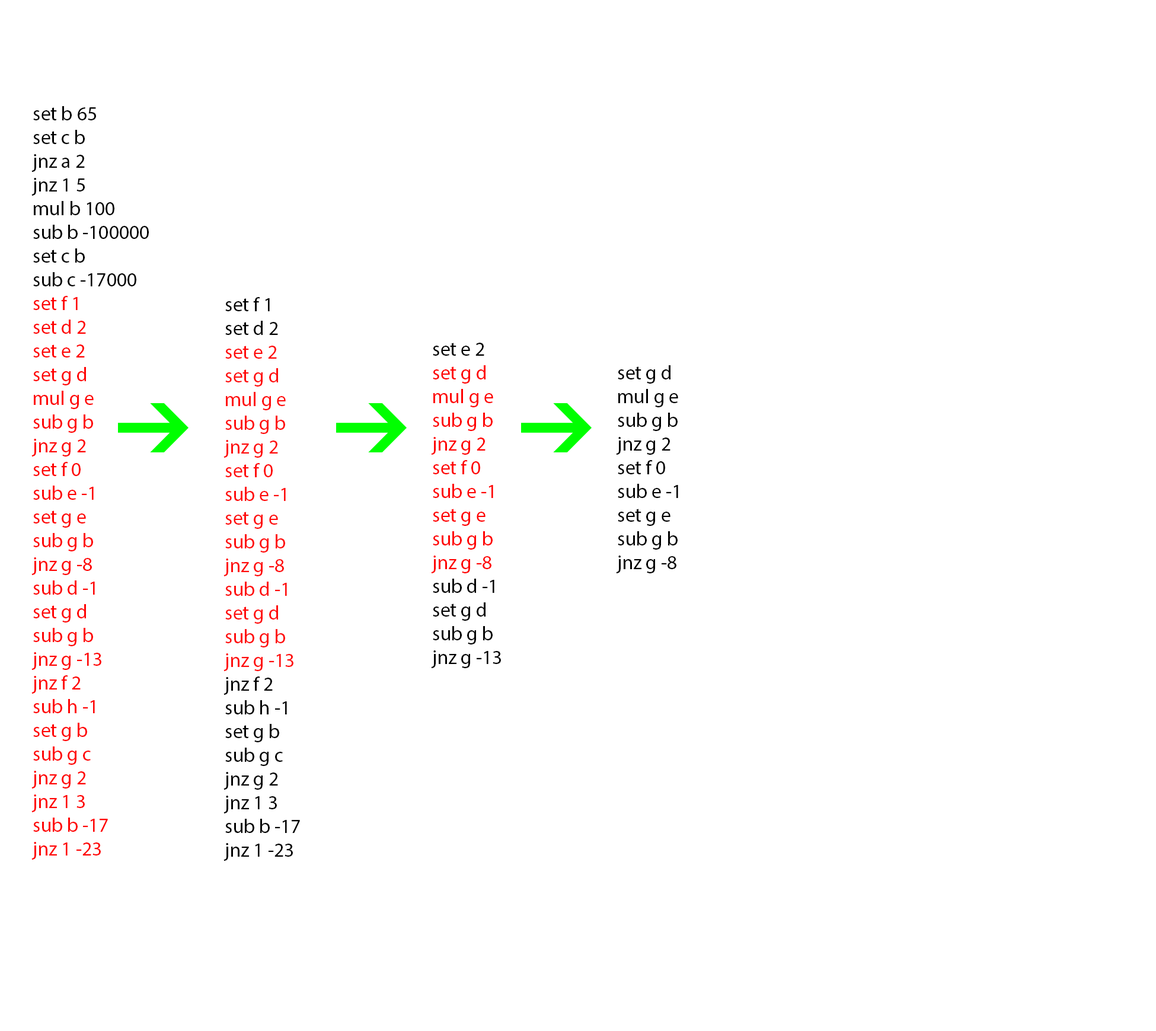
<style>
.page{position:relative;width:1156px;height:1031px;background:#ffffff}
.page>*{position:absolute;margin:0}
.t1{font:19.8px "MyriadPro-Regular";color:#ff0202}
.t2{font:19.8px "MyriadPro-Regular";color:#000000}
.t3{font:19.8px "MyriadPro-Regular";color:#ff0b0b}
.t4{font:19.8px "MyriadPro-Regular";color:#ff0000}
</style>
<div class="page">
<p class="t1" style="left:31px;top:106px;width:118px;height:754px"><span class="t2">set b 65<br>set c b<br>jnz a 2<br>jnz 1 5<br>mul b 100<br>sub b -100000<br>set c b<br>sub c -17000<br></span>set f 1<br>set d 2<br>set e 2<br>set g d<br>mul g e<br>sub g b<br>jnz g 2<br>set f 0<br>sub e -1<br>set g e<br>sub g b<br>jnz g -8<br>sub d -1<br>set g d<br>sub g b<br>jnz g -13<br>jnz f 2<br>sub h -1<br>set g b<br>sub g c<br>jnz g 2<br>jnz 1 3<br>sub b -17<br>jnz 1 -23</p>
<p class="t3" style="left:224px;top:297px;width:76px;height:564px"><span class="t2">set f 1<br>set d 2<br></span>set e 2<br>set g d<br>mul g e<br>sub g b<br>jnz g 2<br>set f 0<br>sub e -1<br>set g e<br>sub g b<br>jnz g -8<br>sub d -1<br>set g d<br>sub g b<br>jnz g -13<br><span class="t2">jnz f 2<br>sub h -1<br>set g b<br>sub g c<br>jnz g 2<br>jnz 1 3<br>sub b -17<br>jnz 1 -23</span></p>
<p class="t4" style="left:431px;top:343px;width:70px;height:325px"><span class="t2"><br>set e 2<br></span>set g d<br>mul g e<br>sub g b<br>jnz g 2<br>set f 0<br>sub e -1<br>set g e<br>sub g b<br>jnz g -8<br><span class="t2">sub d -1<br>set g d<br>sub g b<br>jnz g -13</span></p>
<p class="t2" style="left:616px;top:365px;width:62px;height:208px">set g d<br>mul g e<br>sub g b<br>jnz g 2<br>set f 0<br>sub e -1<br>set g e<br>sub g b<br>jnz g -8</p>
</div>
